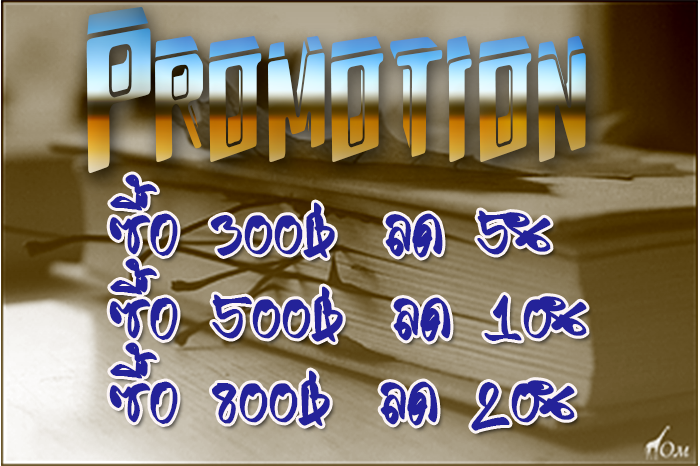
<style>
.page{position:relative;width:700px;height:466px}
.page>*{position:absolute;margin:0}
.t1{font:212.5px "Energydimension";letter-spacing:-0.01em;scale:0.55 1}
.t2{font:70px "ZFImRightSir?";letter-spacing:-0.01em;color:#242299}
</style>
<div class="page">
<p class="t1" style="left:86px;top:6px;width:500px;height:167px">Promotion</p>
<p class="t2" style="left:109px;top:174px;width:478px;height:257px">ซื้อ  300฿   ลด  5%<br>ซื้อ  500฿   ลด  10%<br>ซื้อ  800฿   ลด  20%</p>
</div>
